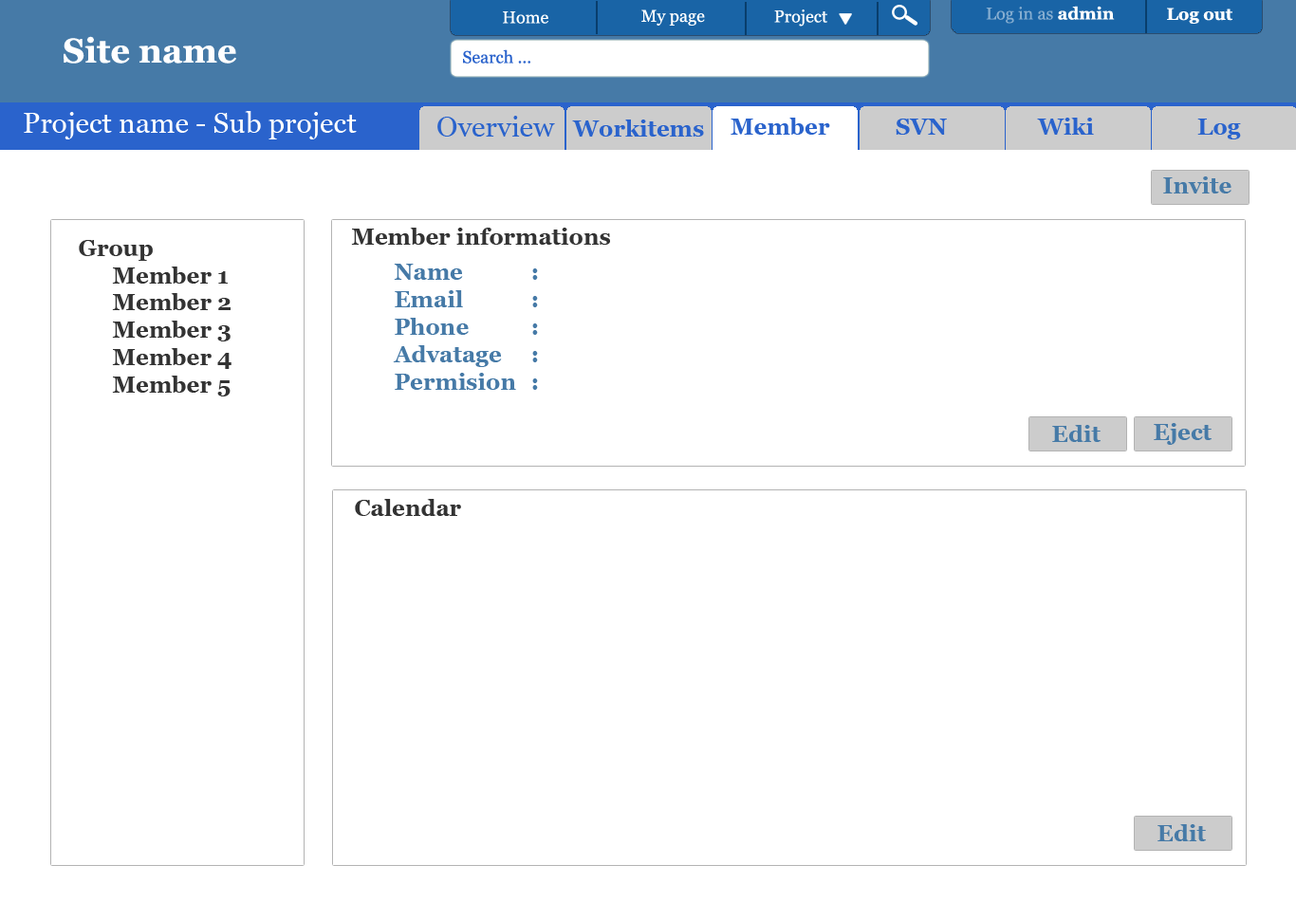
<style>
.page{position:relative;width:1296px;height:920px;background:#ffffff}
.page>*{position:absolute;margin:0}
.t1{font:17.1px "Vani";color:#85add0}
.t2{font:17.1px "Vani-Bold";color:#ffffff}
.t3{font:17.1px "Vani";color:#ffffff}
.t4{font:34.2px "Vani-Bold";color:#ffffff}
.t5{font:17.1px "Vani";color:#2a63cc}
.t6{font:28.5px "Vani";color:#ffffff}
.t7{font:28.5px "Vani";color:#2a63cc}
.t8{font:22.8px "Vani-Bold";color:#2a63cc}
.t9{font:22.8px "Vani-Bold";color:#467aa7}
.t10{font:22.8px "Vani-Bold";color:#333333}
</style>
<div class="page">
<p class="t1" style="left:986px;top:6px;width:129px;height:18px">Log in as <span class="t2">admin</span></p>
<p class="t3" style="left:503px;top:11px;width:45px;height:13px">Home</p>
<p class="t3" style="left:641px;top:9px;width:64px;height:17px">My page</p>
<p class="t3" style="left:774px;top:9px;width:53px;height:18px">Project</p>
<p class="t2" style="left:1167px;top:8px;width:65px;height:16px">Log out</p>
<p class="t4" style="left:64px;top:36px;width:172px;height:28px">Site name</p>
<p class="t5" style="left:463px;top:49px;width:67px;height:15px">Search ...</p>
<p class="t6" style="left:24px;top:111px;width:333px;height:28px">Project name - Sub project</p>
<p class="t7" style="left:437px;top:116px;width:118px;height:21px">Overview</p>
<p class="t8" style="left:572px;top:120px;width:132px;height:17px">Workitems</p>
<p class="t8" style="left:730px;top:118px;width:100px;height:17px">Member</p>
<p class="t8" style="left:896px;top:119px;width:51px;height:16px">SVN</p>
<p class="t8" style="left:1037px;top:118px;width:57px;height:17px">Wiki</p>
<p class="t8" style="left:1197px;top:119px;width:44px;height:20px">Log</p>
<p class="t9" style="left:1163px;top:176px;width:68px;height:18px">Invite</p>
<p class="t10" style="left:351px;top:228px;width:259px;height:17px">Member informations</p>
<p class="t10" style="left:79px;top:240px;width:152px;height:157px">Group<br> Member 1<br> Member 2<br> Member 3<br> Member 4<br> Member 5</p>
<p class="t9" style="left:393px;top:264px;width:145px;height:126px">Name   :<br>Email   : <br>Phone   :<br>Advatage  :<br>Permision  :</p>
<p class="t9" style="left:1052px;top:425px;width:48px;height:17px">Edit</p>
<p class="t9" style="left:1154px;top:423px;width:57px;height:22px">Eject</p>
<p class="t10" style="left:355px;top:499px;width:106px;height:17px">Calendar</p>
<p class="t9" style="left:1157px;top:824px;width:49px;height:17px">Edit</p>
</div>
